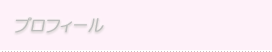
<style>
.page{position:relative;width:272px;height:52px;background:#fef1f9}
.page>*{position:absolute;margin:0}
.t1{font:16px "YentiEGP-Medium-SJIS";color:#bcbcbc;font-weight:bold;font-style:italic}
</style>
<div class="page">
<p class="t1" style="left:15px;top:17px;width:89px;height:16px">プロフィール</p>
</div>
